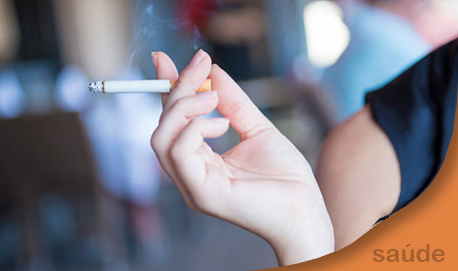
<style>
.page{position:relative;width:458px;height:271px}
.page>*{position:absolute;margin:0}
.t1{font:25px "ArialRoundedMTBold";color:#a65f2f}
</style>
<div class="page">
<p class="t1" style="left:373px;top:244px;width:72px;height:18px">saúde</p>
</div>
